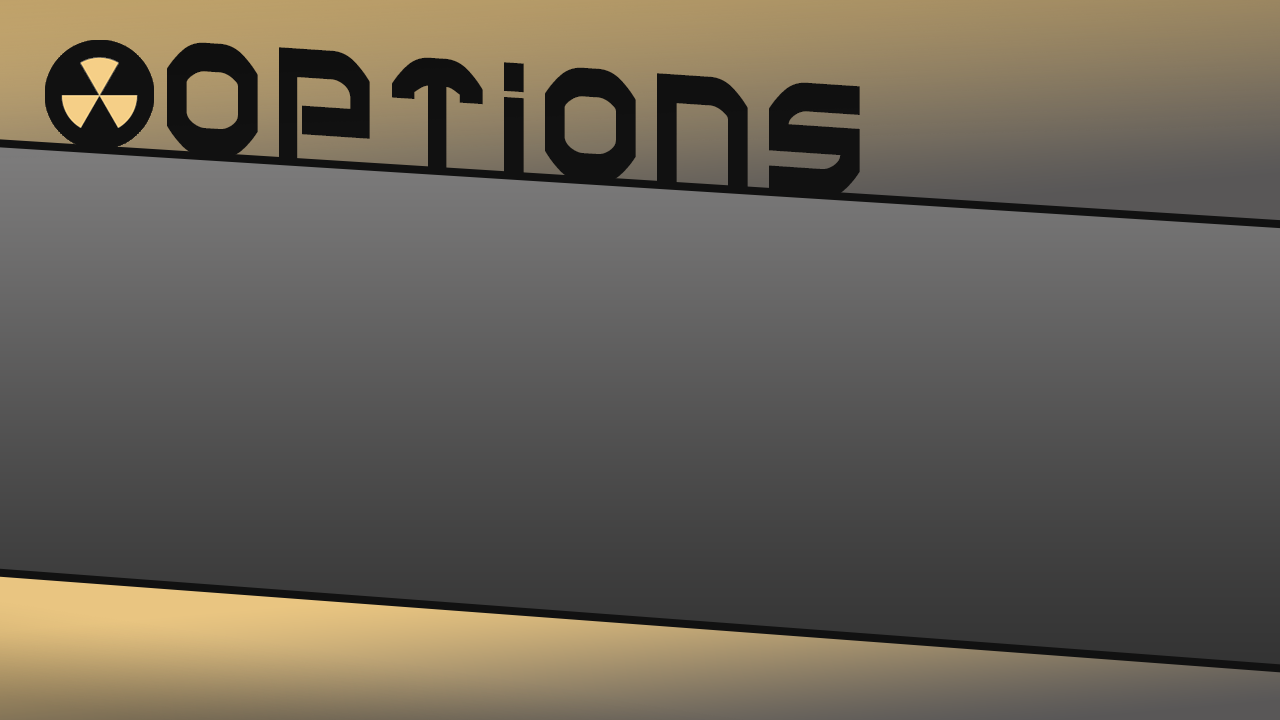
<style>
.page{position:relative;width:1280px;height:720px}
.page>*{position:absolute;margin:0}
.t1{font:145.5px "Oberon";letter-spacing:0.04em;color:#111111;scale:0.64 1}
</style>
<div class="page">
<p class="t1" style="left:167px;top:42px;width:693px;height:156px;rotate:4deg">Options</p>
</div>
